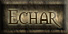
<style>
.page{position:relative;width:68px;height:34px}
.page>*{position:absolute;margin:0}
.t1{font:19px "Morpheus"}
</style>
<div class="page">
<p class="t1" style="left:7px;top:10px;width:55px;height:17px">Echar</p>
</div>
